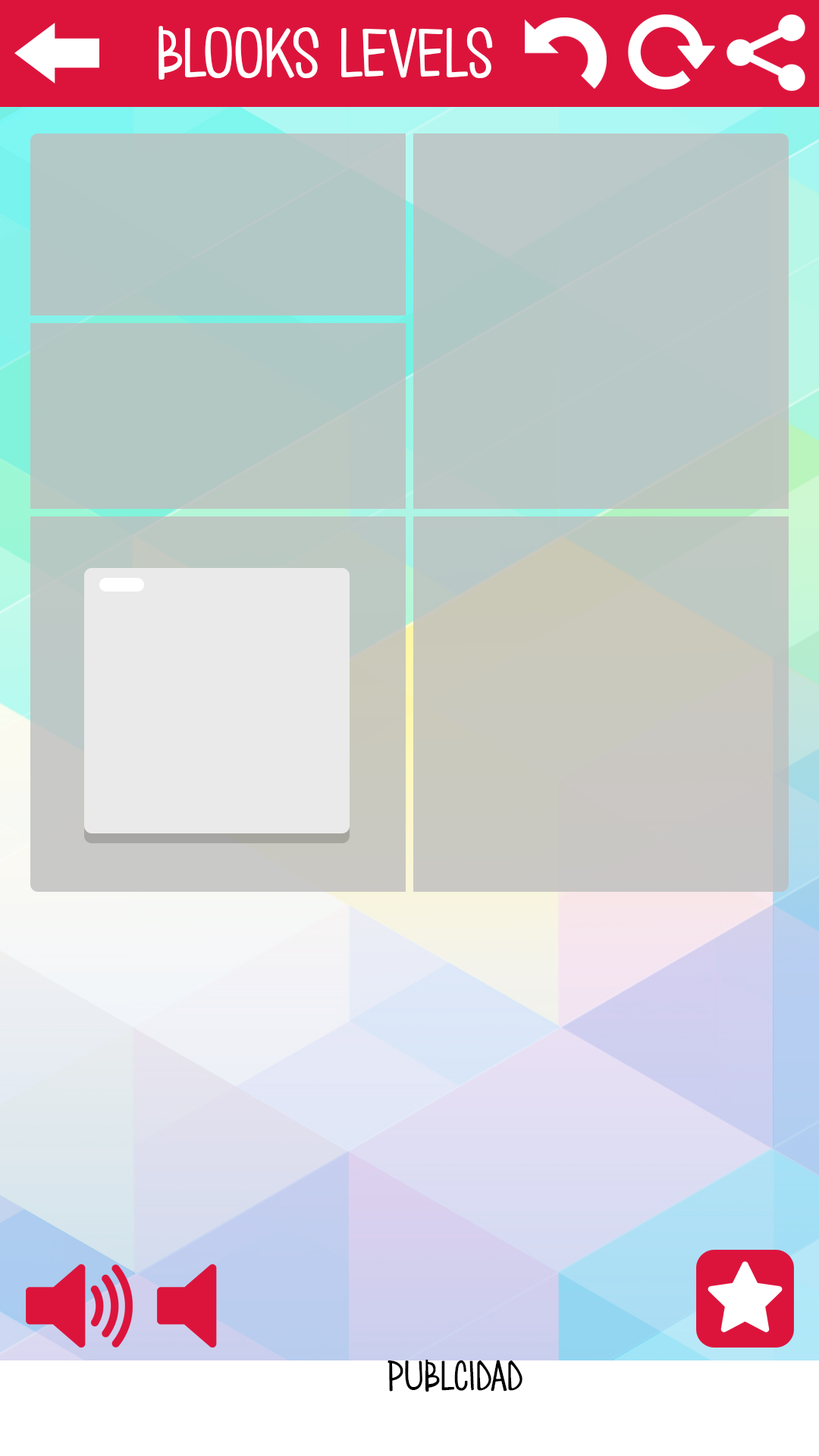
<style>
.page{position:relative;width:819px;height:1456px}
.page>*{position:absolute;margin:0}
.t1{font:91px "Love*Monster";color:#ffffff}
.t2{font:54.6px "Love*Monster";color:#000000}
</style>
<div class="page">
<p class="t1" style="left:158px;top:26px;width:335px;height:54px">blooks levels</p>
<p class="t2" style="left:388px;top:1359px;width:134px;height:33px">publcidad</p>
</div>
